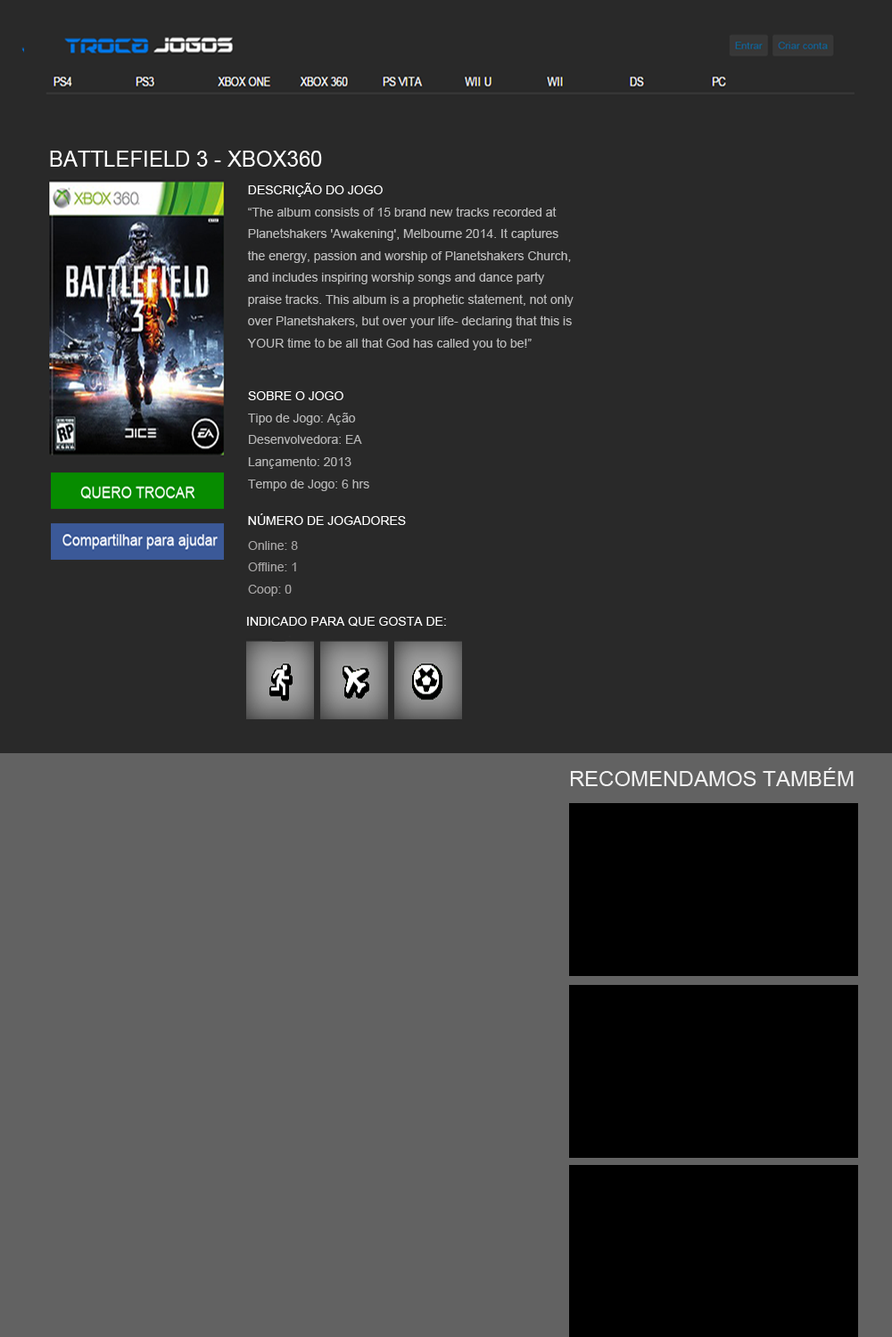
<style>
.page{position:relative;width:892px;height:1337px;background:#292929}
.page>*{position:absolute;margin:0}
.t1{font:21.9px "ArialMT";color:#ffffff}
.t2{font:12.8px/21.9px "ArialMT";color:#bbbbbb}
.t3{font:12.8px/21.9px "ArialMT";color:#fefefe}
.t4{font:12.8px "ArialMT";color:#ffffff}
.t5{font:12.8px/21.9px "ArialMT";color:#b4b4b4}
.t6{font:12.8px/21.9px "ArialMT";color:#a6a4a4}
.t7{font:21.4px "ArialMT";color:#f0f0f0}
</style>
<div class="page">
<p class="t1" style="left:50px;top:151px;width:272px;height:16px">BATTLEFIELD 3 - XBOX360</p>
<p class="t2" style="left:247px;top:183px;width:326px;height:167px"><span class="t3">DESCRIÇÃO DO JOGO<br></span>“The album consists of 15 brand new tracks recorded at Planetshakers 'Awakening', Melbourne 2014. It captures the energy, passion and worship of Planetshakers Church, and includes inspiring worship songs and dance party praise tracks. This album is a prophetic statement, not only over Planetshakers, but over your life- declaring that this is YOUR time to be all that God has called you to be!”</p>
<p class="t4" style="left:248px;top:391px;width:95px;height:9px">SOBRE O JOGO</p>
<p class="t5" style="left:248px;top:413px;width:121px;height:78px">Tipo de Jogo: Ação<br>Desenvolvedora: EA<br>Lançamento: 2013<br>Tempo de Jogo: 6 hrs</p>
<p class="t4" style="left:248px;top:514px;width:158px;height:11px">NÚMERO DE JOGADORES</p>
<p class="t6" style="left:248px;top:541px;width:50px;height:55px">Online: 8<br>Offline: 1<br>Coop: 0</p>
<p class="t4" style="left:247px;top:617px;width:199px;height:10px">INDICADO PARA QUE GOSTA DE:</p>
<p class="t7" style="left:570px;top:768px;width:283px;height:18px">RECOMENDAMOS TAMBÉM</p>
</div>
